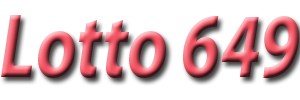
<style>
.page{position:relative;width:300px;height:100px;background:#ffffff}
.page>*{position:absolute;margin:0}
.t1{font:92px "MyriadPro-BoldIt";scale:0.79 1}
</style>
<div class="page">
<p class="t1" style="left:1px;top:15px;width:298px;height:63px">Lotto 649</p>
</div>
